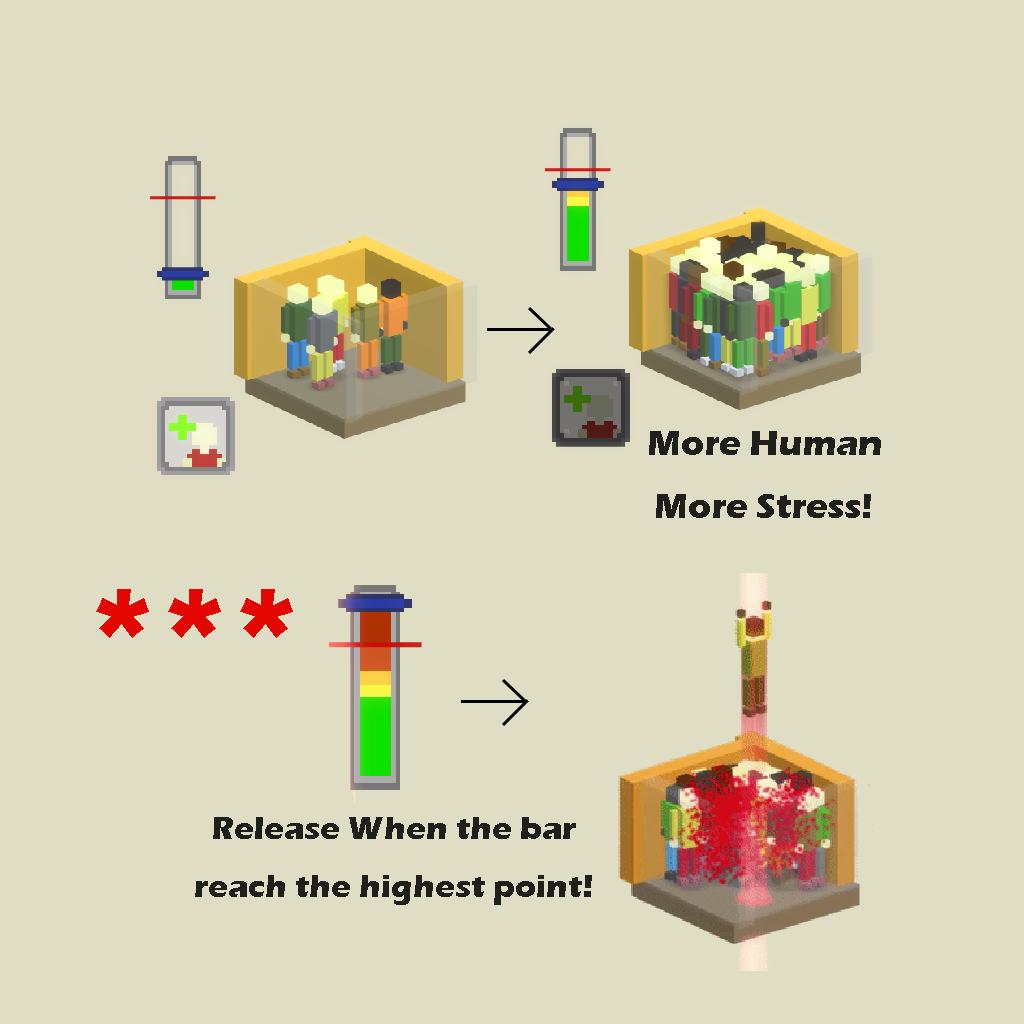
<style>
.page{position:relative;width:1024px;height:1024px;background:#dfddc3}
.page>*{position:absolute;margin:0}
.t1{font:36px "ErasITC-Bold";color:#1f1f1b}
.t2{font:144px "ErasITC-Bold";color:#e20500}
.t3{font:33px "ErasITC-Bold";color:#1f1f1b}
</style>
<div class="page">
<p class="t1" style="left:649px;top:431px;width:232px;height:87px;text-align:center">More Human<br>More Stress!</p>
<p class="t2" style="left:96px;top:589px;width:197px;height:49px">***</p>
<p class="t3" style="left:195px;top:817px;width:397px;height:88px;text-align:center">Release When the bar <br>reach the highest point!</p>
</div>
